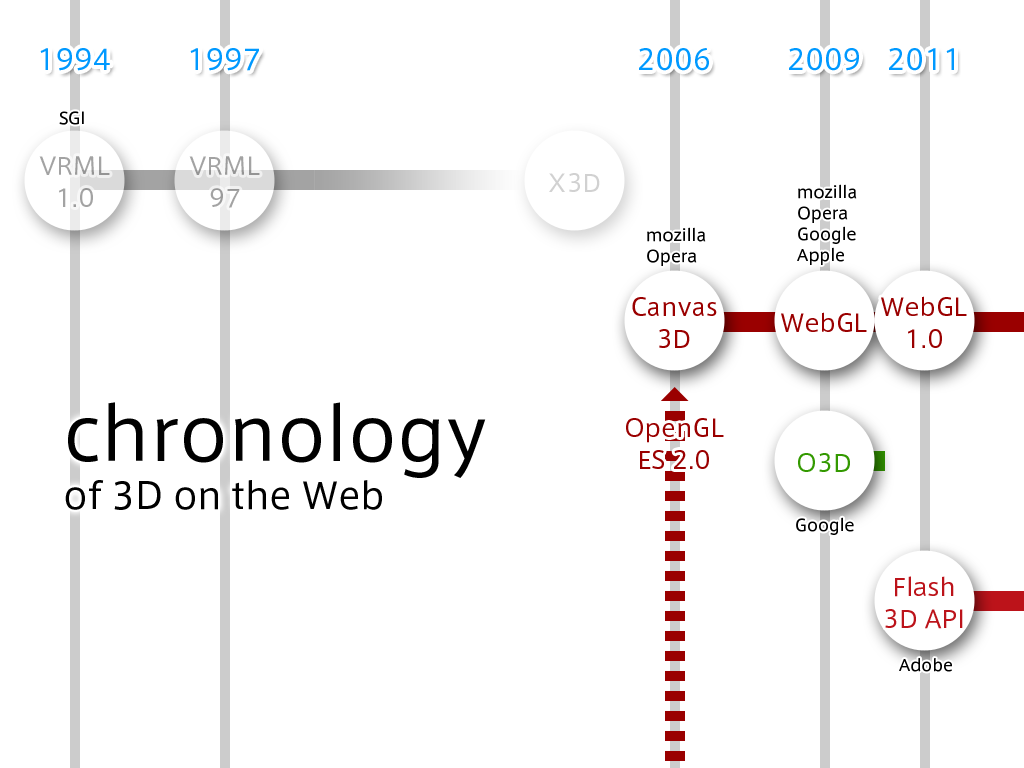
<style>
.page{position:relative;width:1024px;height:768px;background:#ffffff}
.page>*{position:absolute;margin:0}
.t1{font:28px "AxisStd-Regular";color:#0099ff}
.t2{font:16px "AxisStd-Regular";color:#000000}
.t3{font:24px/32px "AxisStd-Regular";color:#a3a3a3}
.t4{font:24px "AxisStd-Regular";color:#d1d1d1}
.t5{font:16px/21px "AxisStd-Regular";color:#000000}
.t6{font:24px/32px "AxisStd-Regular";color:#9a0000}
.t7{font:24px "AxisStd-Regular";color:#9a0000}
.t8{font:36px/80px "AxisStd-Regular";color:#000000}
.t9{font:72px/80px "AxisStd-Regular";color:#000000}
.t10{font:24px "AxisStd-Regular";color:#339900}
.t11{font:24px/32px "AxisStd-Regular";color:#bc131a}
</style>
<div class="page">
<p class="t1" style="left:40px;top:48px;width:70px;height:23px">1994</p>
<p class="t1" style="left:190px;top:48px;width:69px;height:23px">1997</p>
<p class="t1" style="left:639px;top:48px;width:70px;height:23px">2006</p>
<p class="t1" style="left:789px;top:48px;width:70px;height:23px">2009</p>
<p class="t1" style="left:889px;top:48px;width:65px;height:23px">2011</p>
<p class="t2" style="left:59px;top:111px;width:25px;height:14px">SGI</p>
<p class="t3" style="left:39px;top:156px;width:71px;height:51px;text-align:center">VRML<br>1.0</p>
<p class="t3" style="left:189px;top:156px;width:71px;height:52px;text-align:center">VRML<br>97</p>
<p class="t4" style="left:549px;top:173px;width:51px;height:19px">X3D</p>
<p class="t5" style="left:797px;top:184px;width:60px;height:81px">mozilla<br>Opera<br>Google<br>Apple</p>
<p class="t5" style="left:647px;top:227px;width:59px;height:39px">mozilla<br>Opera</p>
<p class="t6" style="left:632px;top:297px;width:85px;height:51px;text-align:center">Canvas<br>3D</p>
<p class="t6" style="left:881px;top:296px;width:86px;height:52px;text-align:center">WebGL<br>1.0</p>
<p class="t7" style="left:781px;top:312px;width:86px;height:20px">WebGL</p>
<p class="t8" style="left:65px;top:402px;width:421px;height:108px"><span class="t9">chronology<br></span>of 3D on the Web</p>
<p class="t6" style="left:626px;top:418px;width:98px;height:51px;text-align:center">OpenGL<br>ES 2.0</p>
<p class="t10" style="left:798px;top:453px;width:52px;height:19px">O3D</p>
<p class="t2" style="left:796px;top:517px;width:58px;height:18px">Google</p>
<p class="t11" style="left:885px;top:576px;width:78px;height:53px;text-align:center">Flash<br>3D API</p>
<p class="t2" style="left:899px;top:658px;width:53px;height:14px">Adobe</p>
</div>
